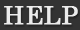
<style>
.page{position:relative;width:80px;height:30px;background:#333333}
.page>*{position:absolute;margin:0}
.t1{font:25px "Century";letter-spacing:0.01em;color:#ececec;font-weight:bold}
</style>
<div class="page">
<p class="t1" style="left:4px;top:6px;width:74px;height:19px">HELP</p>
</div>
